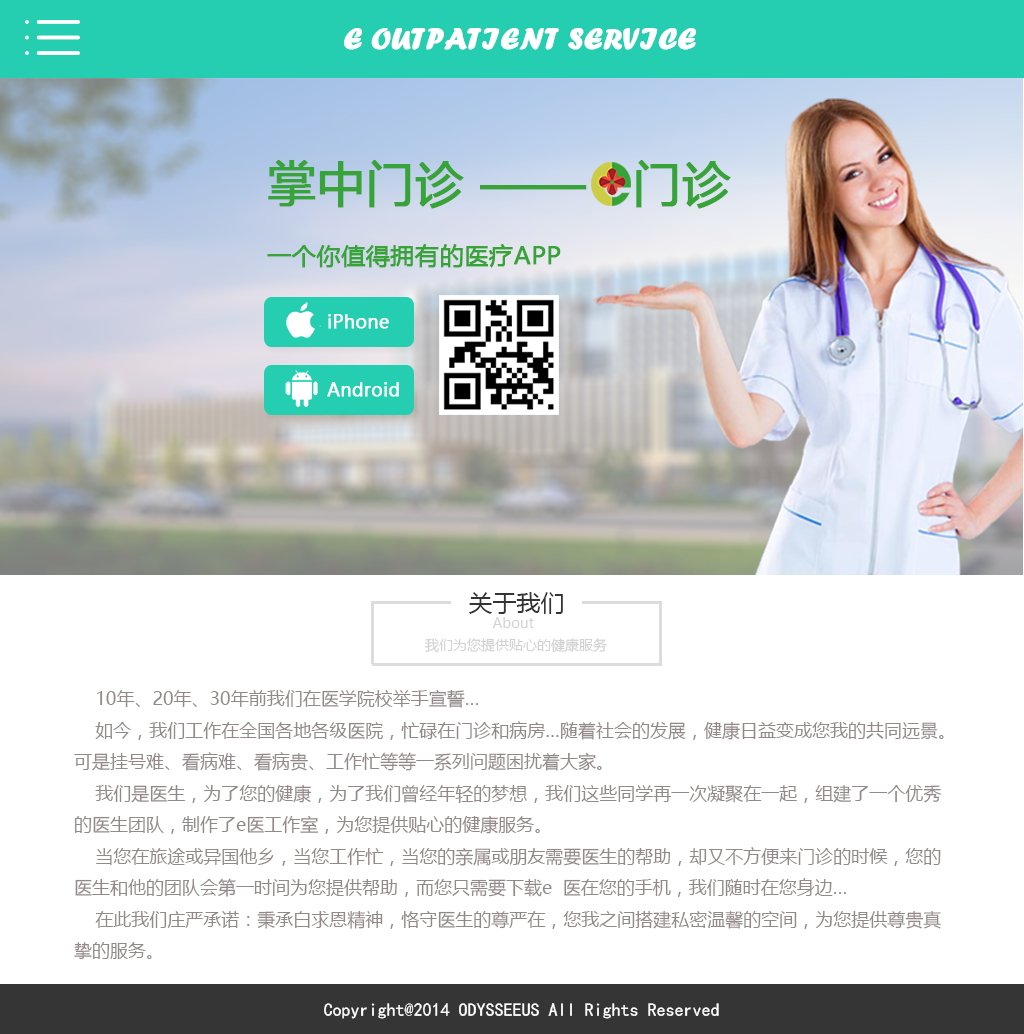
<style>
.page{position:relative;width:1024px;height:1034px;background:#ffffff}
.page>*{position:absolute;margin:0}
.t1{font:30px "ForteMT";color:#ffffff;font-weight:bold}
.t2{font:24px "MicrosoftYaHei";color:#37a339;font-weight:bold}
.t3{font:48px "MicrosoftYaHei";color:#37a339;font-weight:bold}
.t4{font:18px "MicrosoftYaHei";color:#ffffff;font-weight:bold}
.t5{font:24px "MicrosoftYaHei";color:#353535}
.t6{font:14px "MicrosoftYaHei";color:#d2d2d2}
.t7{font:18px "MicrosoftYaHei";color:#938989}
.t8{font:18px "¿¬Ìå";color:#fffefe}
</style>
<div class="page">
<p class="t1" style="left:344px;top:28px;width:352px;height:22px">E OUTPATIENT SERVICE</p>
<p class="t2" style="left:267px;top:160px;width:464px;height:108px"><span class="t3">掌中门诊 ——   门诊<br></span>一个你值得拥有的医疗APP</p>
<p class="t4" style="left:328px;top:314px;width:61px;height:15px">iPhone</p>
<p class="t4" style="left:327px;top:382px;width:72px;height:15px">Android</p>
<p class="t5" style="left:469px;top:592px;width:94px;height:22px">关于我们</p>
<p class="t6" style="left:492px;top:617px;width:42px;height:11px">About</p>
<p class="t6" style="left:424px;top:638px;width:183px;height:15px">我们为您提供贴心的健康服务</p>
<p class="t7" style="left:74px;top:689px;width:870px;height:271px">10年、20年、30年前我们在医学院校举手宣誓…<br>    如今，我们工作在全国各地各级医院，忙碌在门诊和病房…随着社会的发展，健康日益变成您我的共同远景。<br>可是挂号难、看病难、看病贵、工作忙等等一系列问题困扰着大家。<br>    我们是医生，为了您的健康，为了我们曾经年轻的梦想，我们这些同学再一次凝聚在一起，组建了一个优秀<br>的医生团队，制作了e医工作室，为您提供贴心的健康服务。<br>    当您在旅途或异国他乡，当您工作忙，当您的亲属或朋友需要医生的帮助，却又不方便来门诊的时候，您的<br>医生和他的团队会第一时间为您提供帮助，而您只需要下载e  医在您的手机，我们随时在您身边…<br>    在此我们庄严承诺：秉承白求恩精神，恪守医生的尊严在，您我之间搭建私密温馨的空间，为您提供尊贵真<br>挚的服务。</p>
<p class="t8" style="left:324px;top:1003px;width:395px;height:16px">Copyright@2014 ODYSSEEUS All Rights Reserved</p>
</div>
